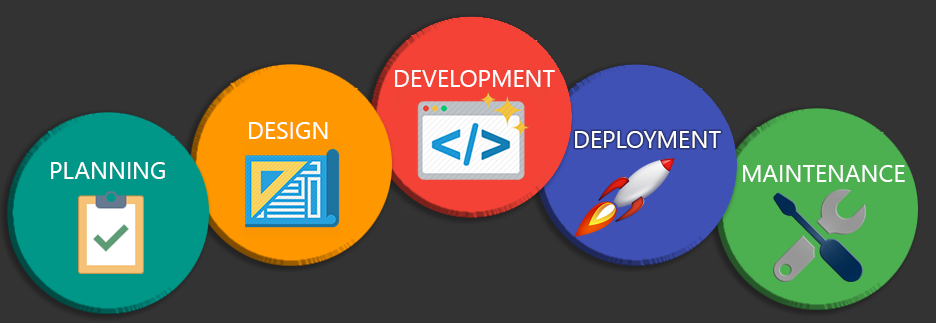
<style>
.page{position:relative;width:936px;height:323px;background:#333333}
.page>*{position:absolute;margin:0}
.t1{font:24px "SegoeUI";color:#ffffff}
</style>
<div class="page">
<p class="t1" style="left:395px;top:70px;width:160px;height:17px">DEVELOPMENT</p>
<p class="t1" style="left:249px;top:122px;width:79px;height:17px">DESIGN</p>
<p class="t1" style="left:575px;top:131px;width:146px;height:17px">DEPLOYMENT</p>
<p class="t1" style="left:51px;top:162px;width:114px;height:17px">PLANNING</p>
<p class="t1" style="left:743px;top:165px;width:162px;height:17px">MAINTENANCE</p>
</div>
